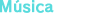
<style>
.page{position:relative;width:100px;height:14px;background:#ffffff}
.page>*{position:absolute;margin:0}
.t1{font:14.8px "RodinProN-DB";color:#59dbdd;font-weight:bold}
</style>
<div class="page">
<p class="t1" style="left:0px;top:0px;width:54px;height:13px">Música</p>
</div>
